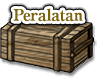
<style>
.page{position:relative;width:97px;height:78px;background:#ffffff}
.page>*{position:absolute;margin:0}
.t1{font:16px "RyuminPro-ExBold";letter-spacing:-0.04em;color:#7f6501}
</style>
<div class="page">
<p class="t1" style="left:13px;top:8px;width:70px;height:14px">Peralatan</p>
</div>
